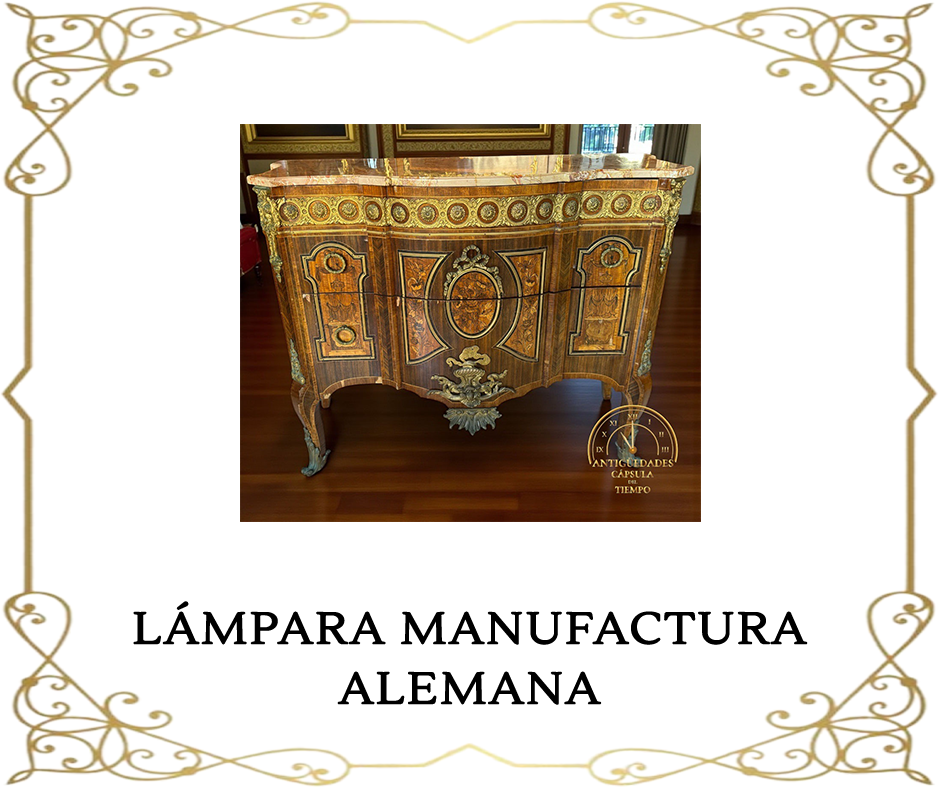
<style>
.page{position:relative;width:940px;height:788px;background:#ffffff}
.page>*{position:absolute;margin:0}
.t1{font:44px/60px "Lustria-Regular";letter-spacing:0.025em;color:#000000;font-weight:bold;scale:1.09 1}
</style>
<div class="page">
<p class="t1" style="left:133px;top:601px;width:675px;height:104px;text-align:center">LÁMPARA MANUFACTURA ALEMANA</p>
</div>
